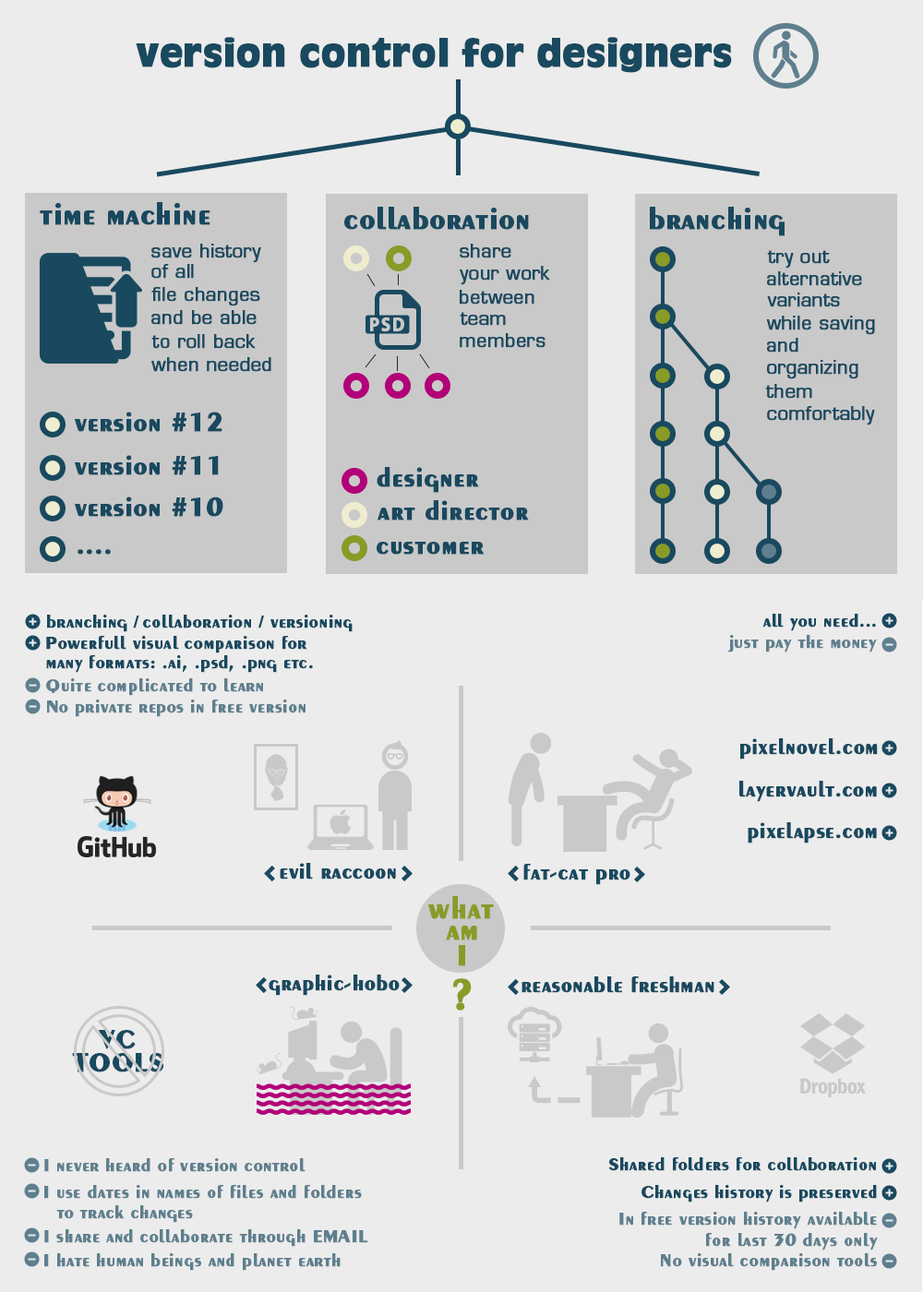
<style>
.page{position:relative;width:923px;height:1292px;background:#ececec}
.page>*{position:absolute;margin:0}
.t1{font:36.9px "AntiqueOliveStd-Black";color:#19495f;font-weight:bold}
.t2{font:31.4px "PeignotLTStd-Bold";color:#19495f;font-weight:bold}
.t3{font:18.5px "EurostileLTStd";color:#19495f;font-weight:bold}
.t4{font:27.7px "PeignotLTStd-Bold";color:#19495f;font-weight:bold}
.t5{font:18.5px "PeignotLTStd-Bold";color:#19495f;font-weight:bold}
.t6{font:18.5px "PeignotLTStd-Bold";color:#5f7f8e;font-weight:bold}
.t7{font:22.1px "PeignotLTStd-Bold";color:#19495f;font-weight:bold}
.t8{font:30.5px "PeignotLTStd-Bold";color:#899b27;font-weight:bold}
.t9{font:44.3px "PeignotLTStd-Bold";color:#899b27;font-weight:bold}
</style>
<div class="page">
<p class="t1" style="left:136px;top:37px;width:596px;height:36px">version control for designers</p>
<p class="t2" style="left:40px;top:202px;width:170px;height:23px">time machine</p>
<p class="t2" style="left:344px;top:207px;width:185px;height:23px">collaboration</p>
<p class="t2" style="left:650px;top:207px;width:134px;height:29px">branching</p>
<p class="t3" style="left:151px;top:244px;width:110px;height:19px">save history</p>
<p class="t3" style="left:460px;top:244px;width:51px;height:14px">share</p>
<p class="t3" style="left:767px;top:250px;width:63px;height:19px">try out</p>
<p class="t3" style="left:151px;top:264px;width:43px;height:15px">of all</p>
<p class="t3" style="left:460px;top:266px;width:90px;height:19px">your work</p>
<p class="t3" style="left:767px;top:271px;width:95px;height:15px">alternative</p>
<p class="t3" style="left:151px;top:287px;width:109px;height:19px">file changes</p>
<p class="t3" style="left:460px;top:290px;width:74px;height:15px">between</p>
<p class="t3" style="left:767px;top:293px;width:73px;height:14px">variants</p>
<p class="t3" style="left:151px;top:310px;width:106px;height:15px">and be able</p>
<p class="t3" style="left:460px;top:312px;width:46px;height:14px">team</p>
<p class="t3" style="left:766px;top:316px;width:109px;height:19px">while saving</p>
<p class="t3" style="left:151px;top:334px;width:105px;height:15px">to roll back</p>
<p class="t3" style="left:460px;top:333px;width:85px;height:15px">members</p>
<p class="t3" style="left:767px;top:338px;width:31px;height:15px">and</p>
<p class="t3" style="left:151px;top:357px;width:120px;height:15px">when needed</p>
<p class="t3" style="left:767px;top:360px;width:91px;height:19px">organizing</p>
<p class="t3" style="left:765px;top:384px;width:47px;height:15px">them</p>
<p class="t4" style="left:75px;top:412px;width:147px;height:20px">version #12</p>
<p class="t3" style="left:767px;top:406px;width:108px;height:19px">comfortably</p>
<p class="t4" style="left:75px;top:455px;width:144px;height:20px">version #11</p>
<p class="t4" style="left:377px;top:467px;width:102px;height:26px">designer</p>
<p class="t4" style="left:75px;top:497px;width:148px;height:20px">version #10</p>
<p class="t4" style="left:377px;top:500px;width:152px;height:21px">art director</p>
<p class="t4" style="left:377px;top:542px;width:108px;height:13px">customer</p>
<p class="t4" style="left:78px;top:549px;width:33px;height:6px">....</p>
<p class="t5" style="left:47px;top:615px;width:92px;height:17px">branching /</p>
<p class="t5" style="left:143px;top:615px;width:210px;height:17px">collaboration / versioning</p>
<p class="t5" style="left:762px;top:614px;width:114px;height:17px">all you need...</p>
<p class="t5" style="left:46px;top:636px;width:261px;height:17px">Powerfull visual comparison for</p>
<p class="t6" style="left:728px;top:635px;width:149px;height:17px">just pay the money</p>
<p class="t5" style="left:46px;top:655px;width:267px;height:18px">many formats: .ai, .psd, .png etc.</p>
<p class="t6" style="left:46px;top:678px;width:217px;height:18px">Quite complicated to learn</p>
<p class="t6" style="left:47px;top:700px;width:258px;height:17px">No private repos in free version</p>
<p class="t7" style="left:740px;top:738px;width:138px;height:22px">pixelnovel.com</p>
<p class="t7" style="left:739px;top:781px;width:138px;height:21px">layervault.com</p>
<p class="t7" style="left:748px;top:822px;width:129px;height:22px">pixelapse.com</p>
<p class="t7" style="left:280px;top:863px;width:116px;height:17px">evil raccoon</p>
<p class="t7" style="left:523px;top:864px;width:107px;height:21px">fat-cat pro</p>
<p class="t8" style="left:428px;top:896px;width:66px;height:23px">what</p>
<p class="t8" style="left:446px;top:926px;width:31px;height:14px">am</p>
<p class="t8" style="left:459px;top:945px;width:6px;height:21px">I</p>
<p class="t7" style="left:269px;top:975px;width:131px;height:21px">graphic-hobo</p>
<p class="t7" style="left:521px;top:976px;width:193px;height:17px">reasonable freshman</p>
<p class="t9" style="left:453px;top:978px;width:19px;height:33px">?</p>
<p class="t4" style="left:99px;top:1030px;width:37px;height:19px">VC</p>
<p class="t4" style="left:72px;top:1053px;width:91px;height:19px">TOOLS</p>
<p class="t5" style="left:608px;top:1157px;width:268px;height:14px">Shared folders for collaboration</p>
<p class="t6" style="left:44px;top:1158px;width:261px;height:14px">I never heard of version control</p>
<p class="t6" style="left:44px;top:1185px;width:318px;height:14px">I use dates in names of files and folders</p>
<p class="t5" style="left:641px;top:1185px;width:236px;height:18px">Changes history is preserved</p>
<p class="t6" style="left:56px;top:1205px;width:137px;height:18px">to track changes</p>
<p class="t6" style="left:619px;top:1212px;width:258px;height:17px">In free version history available</p>
<p class="t6" style="left:44px;top:1229px;width:324px;height:18px">I share and collaborate through EMAIL</p>
<p class="t6" style="left:706px;top:1233px;width:172px;height:18px">for last 30 days only</p>
<p class="t6" style="left:44px;top:1253px;width:297px;height:18px">I hate human beings and planet earth</p>
<p class="t6" style="left:661px;top:1253px;width:216px;height:18px">No visual comparison tools</p>
</div>
